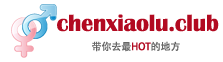
<style>
.page{position:relative;width:223px;height:62px;background:#ffffff}
.page>*{position:absolute;margin:0}
.t1{font:23.9px "BritannicBold";letter-spacing:-0.01em;color:#b20a21}
.t2{font:10px "AdobeHeitiStd-Regular";letter-spacing:-0.01em;color:#666666}
.t3{font:10px "AdobeHeitiStd-Regular";letter-spacing:-0.01em;color:#b20a21}
</style>
<div class="page">
<p class="t1" style="left:57px;top:14px;width:162px;height:18px">chenxiaolu.club</p>
<p class="t2" style="left:92px;top:41px;width:88px;height:11px">带你去最<span class="t3">HOT</span>的地方</p>
</div>
